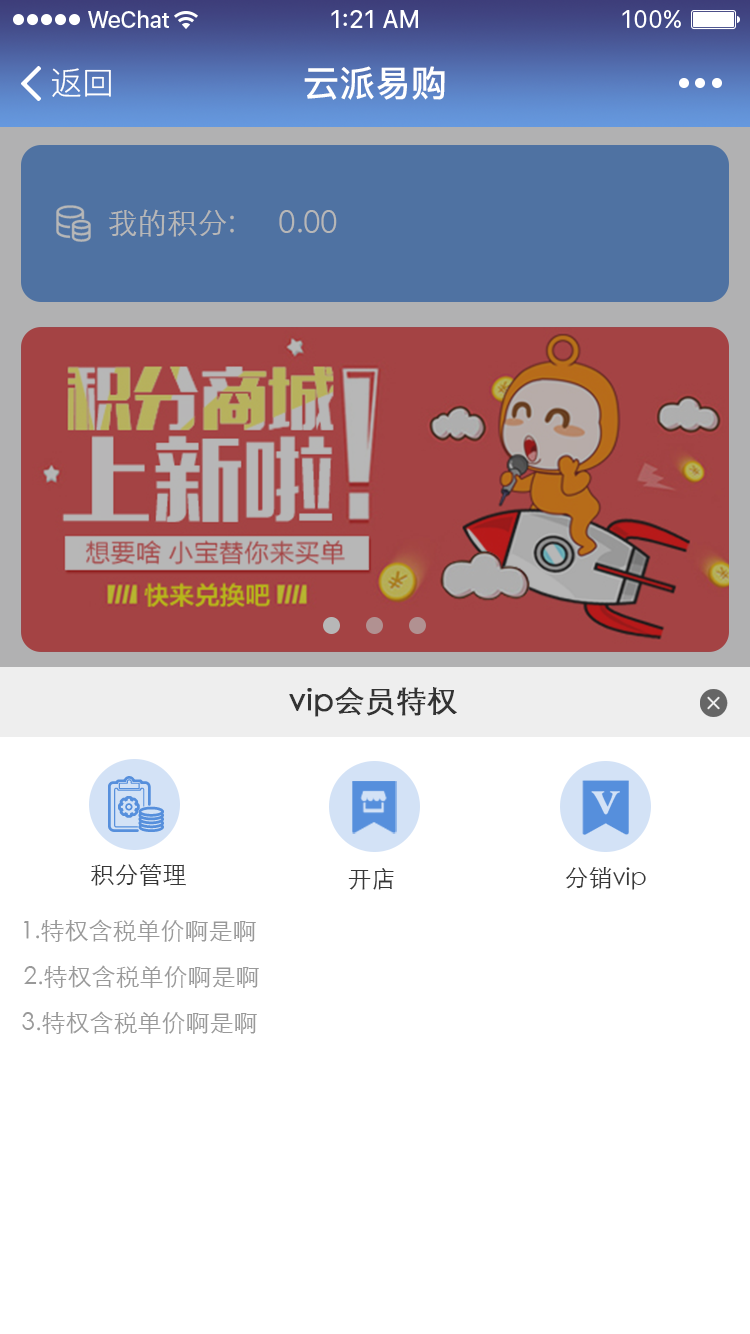
<style>
.page{position:relative;width:750px;height:1334px;background:#ffffff}
.page>*{position:absolute;margin:0}
.t1{font:32px "PingFang-SC-Regular";color:#ffffff}
.t2{font:36px "PingFang-SC-Bold";color:#ffffff}
.t3{font:30px "STXihei";color:#b7b7b7}
.t4{font:30px "STXihei";color:#333333;font-weight:bold}
.t5{font:24px "STXihei";color:#373737}
.t6{font:24px "STXihei";color:#999999}
</style>
<div class="page">
<p class="t1" style="left:52px;top:68px;width:59px;height:29px">返回</p>
<p class="t2" style="left:304px;top:66px;width:141px;height:34px">云派易购</p>
<p class="t3" style="left:109px;top:209px;width:125px;height:28px">我的积分:</p>
<p class="t3" style="left:279px;top:210px;width:58px;height:23px">0.00</p>
<p class="t4" style="left:289px;top:687px;width:168px;height:30px">vip会员特权</p>
<p class="t5" style="left:91px;top:863px;width:95px;height:23px">积分管理</p>
<p class="t5" style="left:348px;top:868px;width:46px;height:22px">开店</p>
<p class="t5" style="left:565px;top:867px;width:81px;height:23px">分销vip</p>
<p class="t6" style="left:24px;top:919px;width:232px;height:23px">1.特权含税单价啊是啊</p>
<p class="t6" style="left:24px;top:965px;width:235px;height:23px">2.特权含税单价啊是啊</p>
<p class="t6" style="left:22px;top:1011px;width:235px;height:23px">3.特权含税单价啊是啊</p>
</div>
